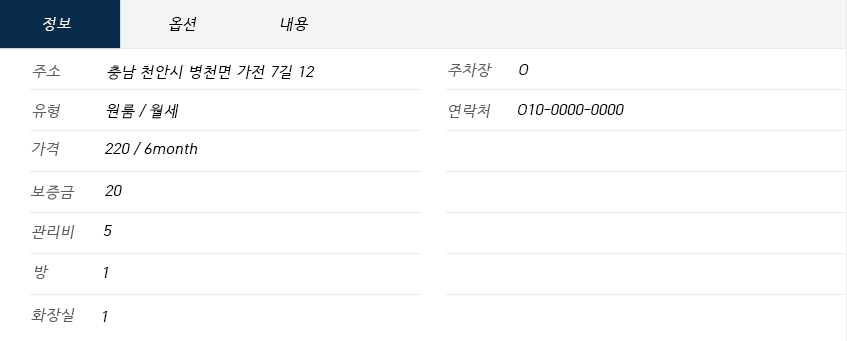
<style>
.page{position:relative;width:847px;height:341px;background:#ffffff}
.page>*{position:absolute;margin:0}
.t1{font:15px "HCRDotum";color:#f2f4f5;font-style:italic}
.t2{font:15px "HCRDotum";color:#000000;font-style:italic}
.t3{font:15px "HCRDotum";color:#5e5e5e;font-style:italic}
</style>
<div class="page">
<p class="t1" style="left:43px;top:17px;width:28px;height:14px">정보</p>
<p class="t2" style="left:169px;top:17px;width:28px;height:14px">옵션</p>
<p class="t2" style="left:280px;top:17px;width:29px;height:14px">내용</p>
<p class="t3" style="left:32px;top:65px;width:29px;height:13px">주소</p>
<p class="t2" style="left:107px;top:65px;width:208px;height:15px">충남 천안시 병천면 가전 7길 12</p>
<p class="t3" style="left:448px;top:63px;width:44px;height:14px">주차장</p>
<p class="t2" style="left:519px;top:64px;width:10px;height:11px">O</p>
<p class="t3" style="left:32px;top:104px;width:28px;height:14px">유형</p>
<p class="t2" style="left:106px;top:104px;width:73px;height:15px">원룸 / 월세</p>
<p class="t3" style="left:449px;top:104px;width:42px;height:14px">연락처</p>
<p class="t2" style="left:518px;top:104px;width:106px;height:11px">O10-0000-0000</p>
<p class="t3" style="left:31px;top:142px;width:28px;height:14px">가격</p>
<p class="t2" style="left:104px;top:142px;width:94px;height:13px">220 / 6month</p>
<p class="t3" style="left:30px;top:185px;width:45px;height:15px">보증금</p>
<p class="t2" style="left:105px;top:185px;width:17px;height:11px">20</p>
<p class="t3" style="left:32px;top:225px;width:43px;height:14px">관리비</p>
<p class="t2" style="left:103px;top:225px;width:9px;height:11px">5</p>
<p class="t3" style="left:34px;top:265px;width:15px;height:14px">방</p>
<p class="t2" style="left:104px;top:267px;width:5px;height:11px">1</p>
<p class="t3" style="left:31px;top:308px;width:44px;height:14px">화장실</p>
<p class="t2" style="left:103px;top:311px;width:5px;height:11px">1</p>
</div>
